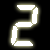
<style>
.page{position:relative;width:50px;height:50px;background:#000000}
.page>*{position:absolute;margin:0}
.t1{font:55px "LiquidCrystal";color:#ffffff}
</style>
<div class="page">
<p class="t1" style="left:11px;top:5px;width:27px;height:41px">2</p>
</div>
